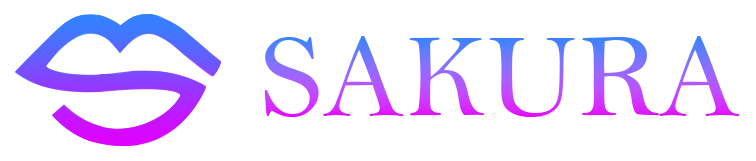
<style>
.page{position:relative;width:756px;height:161px;background:#ffffff}
.page>*{position:absolute;margin:0}
.t1{font:120px "BellMT"}
</style>
<div class="page">
<p class="t1" style="left:264px;top:36px;width:476px;height:81px">SAKURA</p>
</div>
